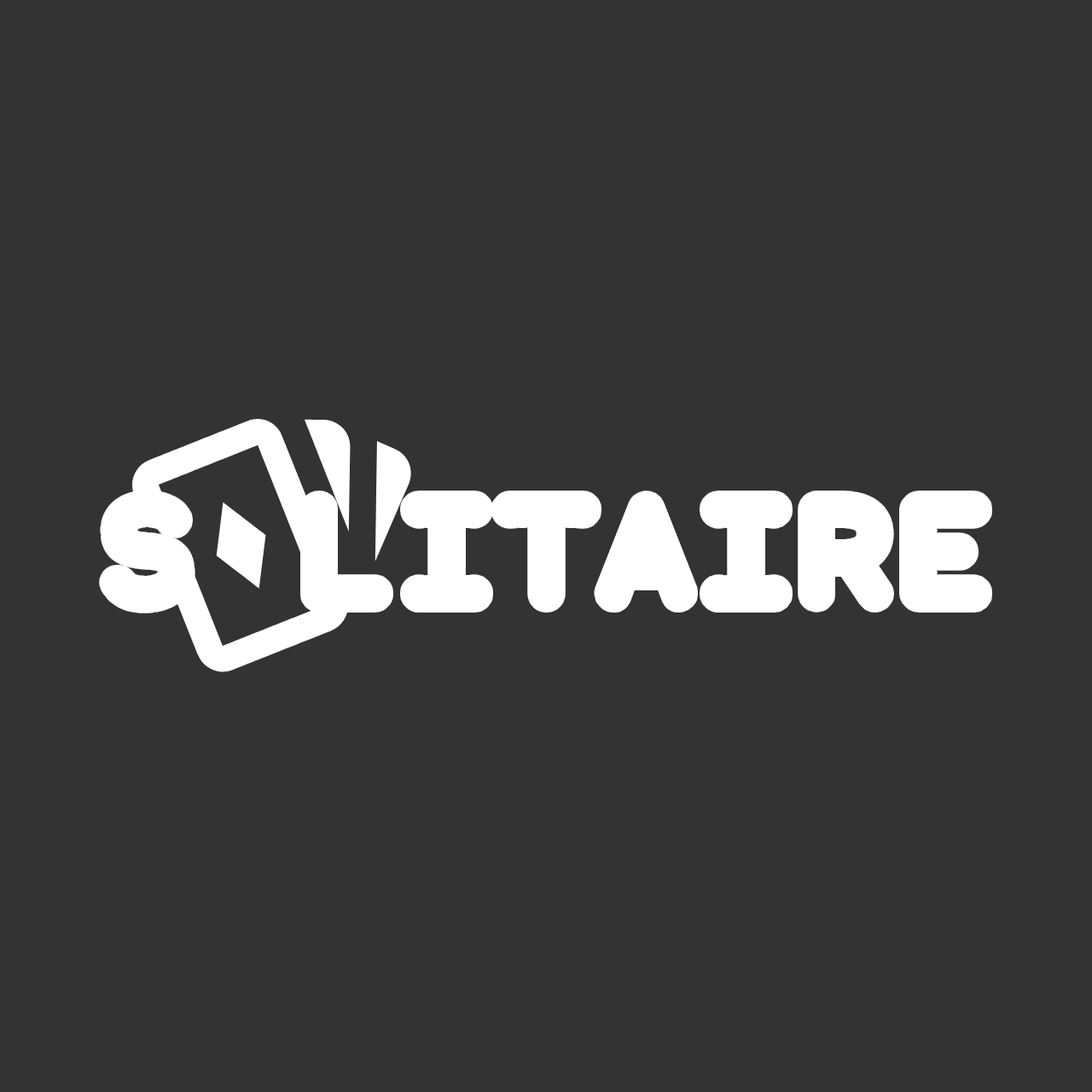
<style>
.page{position:relative;width:1092px;height:1092px;background:#333333}
.page>*{position:absolute;margin:0}
.t1{font:142.6px "AlmaMono-Bold";color:#ffffff}
</style>
<div class="page">
<p class="t1" style="left:107px;top:498px;width:875px;height:109px">S LITAIRE</p>
<p class="t1" style="left:107px;top:498px;width:875px;height:109px">S LITAIRE</p>
</div>
